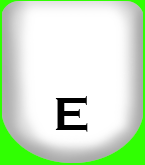
<style>
.page{position:relative;width:145px;height:165px;background:#ffffff}
.page>*{position:absolute;margin:0}
.t1{font:48px "CopperplateGothic-Bold";color:#000000}
</style>
<div class="page">
<p class="t1" style="left:55px;top:96px;width:33px;height:36px">E</p>
</div>
